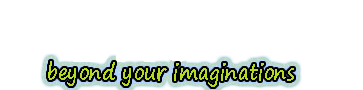
<style>
.page{position:relative;width:363px;height:90px;background:#ffffff}
.page>*{position:absolute;margin:0}
.t1{font:22px "SegoePrint-Bold";color:#b5da22;scale:0.87 1}
</style>
<div class="page">
<p class="t1" style="left:48px;top:61px;width:246px;height:26px">beyond your imaginations</p>
</div>
